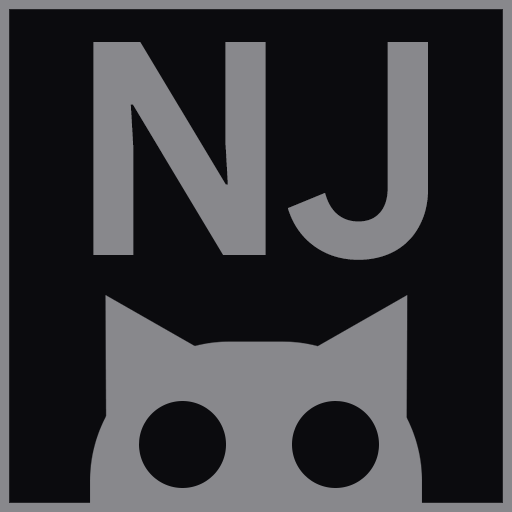
<style>
.page{position:relative;width:512px;height:512px;background:#0b0b0e}
.page>*{position:absolute;margin:0}
.t1{font:297.1px "ProductSans-Bold";letter-spacing:-0.02em;color:#88888c}
</style>
<div class="page">
<p class="t1" style="left:93px;top:42px;width:335px;height:218px">NJ</p>
</div>
